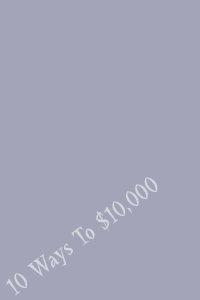
<style>
.page{position:relative;width:200px;height:300px;background:#a4a4b8}
.page>*{position:absolute;margin:0}
.t1{font:25.4px "LaBambaLetPlain";letter-spacing:0.01em;color:#d6d6e0;scale:0.9 1}
</style>
<div class="page">
<p class="t1" style="left:5px;top:177px;width:153px;height:119px;rotate:-36deg">10 Ways To $10,000</p>
</div>
